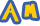
<style>
.page{position:relative;width:40px;height:26px;background:#ffffff}
.page>*{position:absolute;margin:0}
.t1{font:16.7px "PokemonSolidNormal";color:#ffcb05}
</style>
<div class="page">
<p class="t1" style="left:1px;top:2px;width:18px;height:20px">A</p>
<p class="t1" style="left:24px;top:3px;width:14px;height:16px">M</p>
</div>
